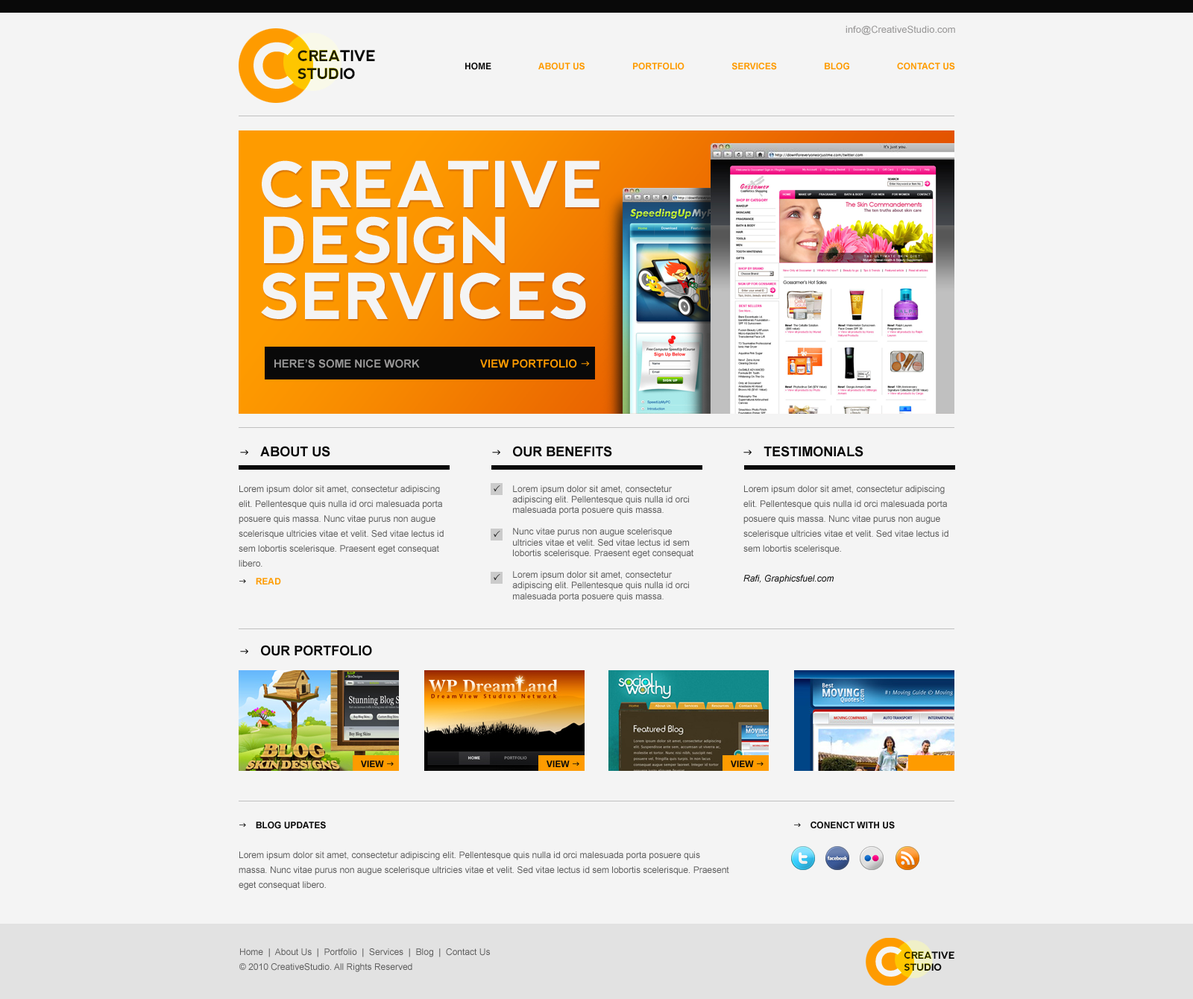
<style>
.page{position:relative;width:1193px;height:999px;background:#f4f4f4}
.page>*{position:absolute;margin:0}
.t1{font:9.7px "ArialMT";color:#999898}
.t2{font:63.4px "nevis-Bold";letter-spacing:-0.025em;color:#f4f4f4;text-transform:uppercase}
.t3{font:14.9px "nevis-Bold";letter-spacing:-0.025em;color:#090909;text-transform:uppercase}
.t4{font:8.9px "Arial-BoldMT";color:#fe9b00;text-transform:uppercase}
.t5{font:8.9px "Arial-BoldMT";color:#090909;text-transform:uppercase}
.t6{font:63.4px/55.9px "nevis-Bold";color:#f4f4f4;text-transform:uppercase}
.t7{font:11.2px "Arial-BoldMT";color:#999898;text-transform:uppercase}
.t8{font:11.2px "Arial-BoldMT";color:#fe9b00;text-transform:uppercase}
.t9{font:11.2px "Wingdings3";color:#fe9b00}
.t10{font:13.4px "Arial-BoldMT";color:#090909;text-transform:uppercase}
.t11{font:11.2px "Wingdings3";color:#090909}
.t12{font:8.9px/14.9px "ArialMT";color:#5d5d5d}
.t13{font:8.9px "ArialMT";color:#5d5d5d}
.t14{font:8.9px/14.9px "Arial-ItalicMT";color:#090909}
.t15{font:8.9px "Wingdings3";color:#090909}
.t16{font:8.9px/55.9px "Wingdings3";color:#090909}
.t17{font:8.9px/55.9px "Arial-BoldMT";color:#090909;text-transform:uppercase}
.t18{font:41.2px "nevis-Bold";letter-spacing:-0.025em;color:#f4f4f4;text-transform:uppercase}
.t19{font:9.7px "nevis-Bold";letter-spacing:-0.025em;color:#090909;text-transform:uppercase}
</style>
<div class="page">
<p class="t1" style="left:846px;top:25px;width:109px;height:10px">info@CreativeStudio.com</p>
<p class="t2" style="left:254px;top:42px;width:40px;height:47px">C</p>
<p class="t3" style="left:298px;top:50px;width:77px;height:29px">creative<br>studio</p>
<p class="t4" style="left:465px;top:63px;width:490px;height:7px"><span class="t5">home</span>                   about us                   portfolio                   services                   blog                   contact us</p>
<p class="t6" style="left:261px;top:160px;width:339px;height:159px">Creative<br>Design<br>Services</p>
<p class="t7" style="left:274px;top:359px;width:146px;height:9px">Here’s some nice work</p>
<p class="t8" style="left:480px;top:359px;width:110px;height:9px">view portfolio <span class="t9">g</span></p>
<p class="t10" style="left:240px;top:446px;width:90px;height:11px"><span class="t11">g </span>about us</p>
<p class="t10" style="left:492px;top:446px;width:120px;height:11px"><span class="t11">g </span>our Benefits</p>
<p class="t10" style="left:744px;top:446px;width:120px;height:11px"><span class="t11">g </span>testimonials</p>
<p class="t12" style="left:239px;top:485px;width:205px;height:82px">Lorem ipsum dolor sit amet, consectetur adipiscing elit. Pellentesque quis nulla id orci malesuada porta posuere quis massa. Nunc vitae purus non augue scelerisque ultricies vitae et velit. Sed vitae lectus id sem lobortis scelerisque. Praesent eget consequat libero.</p>
<p class="t13" style="left:512px;top:485px;width:182px;height:117px">Lorem ipsum dolor sit amet, consectetur adipiscing elit. Pellentesque quis nulla id orci malesuada porta posuere quis massa. <br><br>Nunc vitae purus non augue scelerisque ultricies vitae et velit. Sed vitae lectus id sem lobortis scelerisque. Praesent eget consequat<br><br>Lorem ipsum dolor sit amet, consectetur adipiscing elit. Pellentesque quis nulla id orci malesuada porta posuere quis massa.</p>
<p class="t12" style="left:744px;top:485px;width:205px;height:99px">Lorem ipsum dolor sit amet, consectetur adipiscing elit. Pellentesque quis nulla id orci malesuada porta posuere quis massa. Nunc vitae purus non augue scelerisque ultricies vitae et velit. Sed vitae lectus id sem lobortis scelerisque. <br><br><span class="t14">Rafi, Graphicsfuel.com</span></p>
<p class="t4" style="left:239px;top:578px;width:42px;height:7px"><span class="t15">g </span>read</p>
<p class="t10" style="left:240px;top:645px;width:132px;height:11px"><span class="t11">g </span>our portfolio</p>
<p class="t5" style="left:361px;top:761px;width:33px;height:6px">view <span class="t15">g</span></p>
<p class="t5" style="left:547px;top:761px;width:32px;height:6px">view <span class="t15">g</span></p>
<p class="t5" style="left:731px;top:761px;width:33px;height:6px">view <span class="t15">g</span></p>
<p class="t12" style="left:239px;top:822px;width:490px;height:68px"><span class="t16">g </span><span class="t17">blog updates<br></span><br>Lorem ipsum dolor sit amet, consectetur adipiscing elit. Pellentesque quis nulla id orci malesuada porta posuere quis massa. Nunc vitae purus non augue scelerisque ultricies vitae et velit. Sed vitae lectus id sem lobortis scelerisque. Praesent eget consequat libero.</p>
<p class="t5" style="left:794px;top:822px;width:101px;height:7px"><span class="t15">g </span>conenct with us</p>
<p class="t12" style="left:239px;top:949px;width:251px;height:23px">Home  |  About Us  |  Portfolio  |  Services  |  Blog  |  Contact Us<br>© 2010 CreativeStudio. All Rights Reserved</p>
<p class="t18" style="left:876px;top:946px;width:26px;height:31px">C</p>
<p class="t19" style="left:904px;top:952px;width:51px;height:19px">creative<br>studio</p>
</div>
